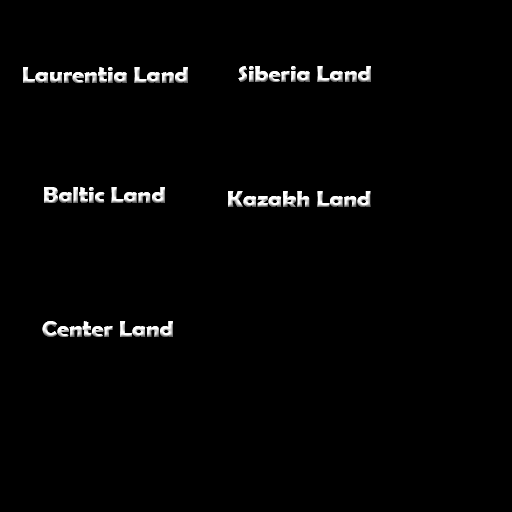
<style>
.page{position:relative;width:512px;height:512px;background:#000000}
.page>*{position:absolute;margin:0}
.t1{font:24px "BerlinSansFBDemi-Bold"}
</style>
<div class="page">
<p class="t1" style="left:23px;top:67px;width:165px;height:16px">Laurentia Land</p>
<p class="t1" style="left:238px;top:66px;width:133px;height:16px">Siberia Land</p>
<p class="t1" style="left:44px;top:187px;width:121px;height:16px">Baltic Land</p>
<p class="t1" style="left:228px;top:191px;width:143px;height:16px">Kazakh Land</p>
<p class="t1" style="left:42px;top:321px;width:131px;height:16px">Center Land</p>
</div>
